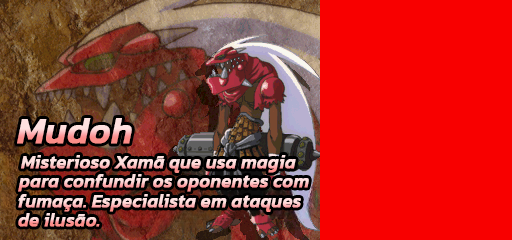
<style>
.page{position:relative;width:512px;height:240px;background:#f80000}
.page>*{position:absolute;margin:0}
.t1{font:36px "Kanit-MediumItalic";font-weight:bold}
.t2{font:18px "Kanit-MediumItalic";font-weight:bold}
</style>
<div class="page">
<p class="t1" style="left:17px;top:118px;width:115px;height:26px">Mudoh</p>
<p class="t2" style="left:21px;top:155px;width:275px;height:18px">Misterioso Xamã que usa magia</p>
<p class="t2" style="left:18px;top:174px;width:291px;height:18px">para confundir os oponentes com</p>
<p class="t2" style="left:18px;top:194px;width:283px;height:18px">fumaça. Especialista em ataques</p>
<p class="t2" style="left:18px;top:213px;width:82px;height:14px">de ilusão.</p>
</div>
